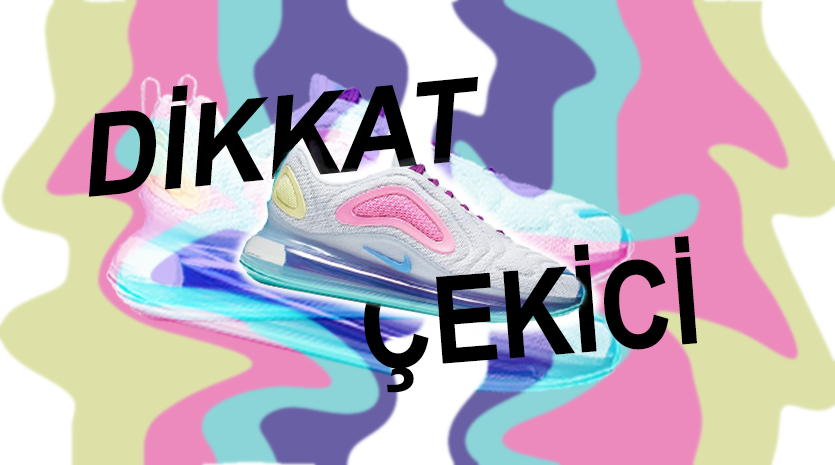
<style>
.page{position:relative;width:835px;height:465px}
.page>*{position:absolute;margin:0}
.t1{font:116.2px "Arial-BoldMT";color:#000000;scale:0.92 1}
.t2{font:121.1px "Arial-BoldMT";color:#000000;scale:0.83 1}
</style>
<div class="page">
<p class="t1" style="left:88px;top:76px;width:390px;height:121px;rotate:-5deg">DİKKAT</p>
<p class="t2" style="left:364px;top:236px;width:333px;height:157px;rotate:-5deg">ÇEKİCİ</p>
</div>
